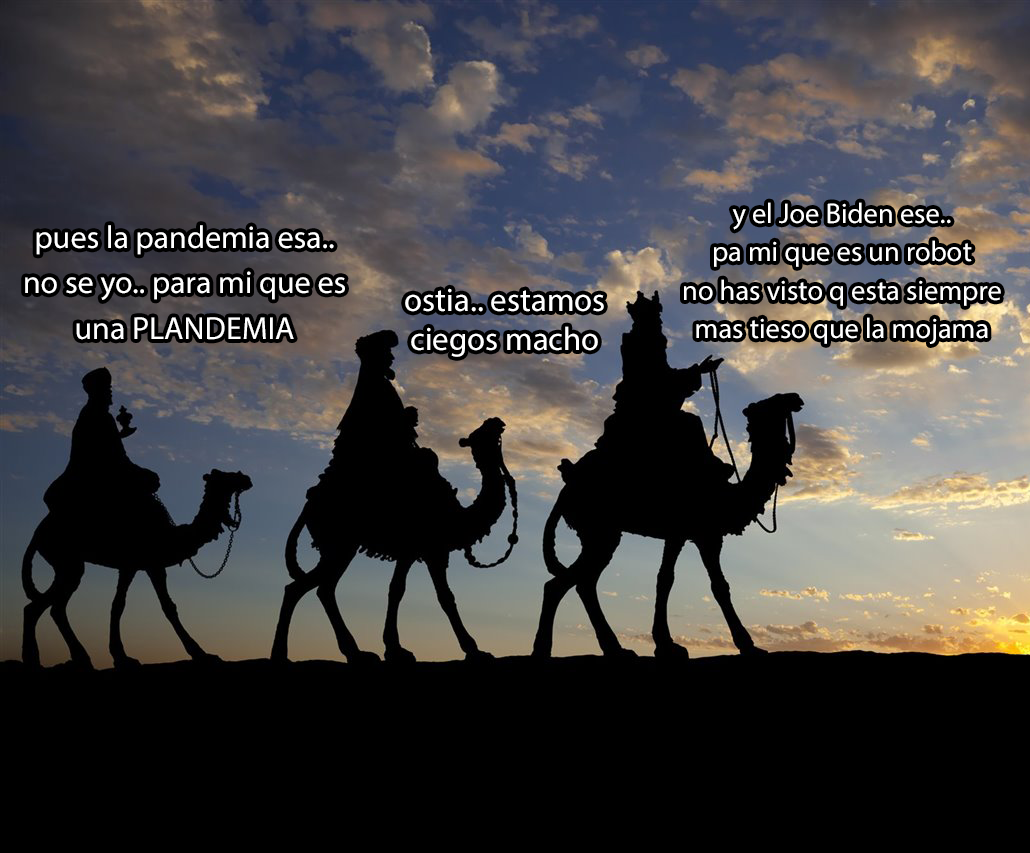
<style>
.page{position:relative;width:1030px;height:853px;background:#000000}
.page>*{position:absolute;margin:0}
.t1{font:28.5px "MyriadPro-Regular";color:#ffffff}
.t2{font:32px "MyriadPro-Regular";color:#ffffff}
.t3{font:32.9px "MyriadPro-Regular";color:#ffffff}
</style>
<div class="page">
<p class="t1" style="left:684px;top:202px;width:317px;height:142px;text-align:center">y el Joe Biden ese..<br>pa mi que es un robot<br>no has visto q esta siempre<br>mas tieso que la mojama</p>
<p class="t2" style="left:25px;top:225px;width:320px;height:115px;text-align:center">pues la pandemia esa..<br>no se yo.. para mi que es<br>una PLANDEMIA</p>
<p class="t3" style="left:405px;top:288px;width:199px;height:69px;text-align:center">ostia.. estamos<br>ciegos macho</p>
</div>
